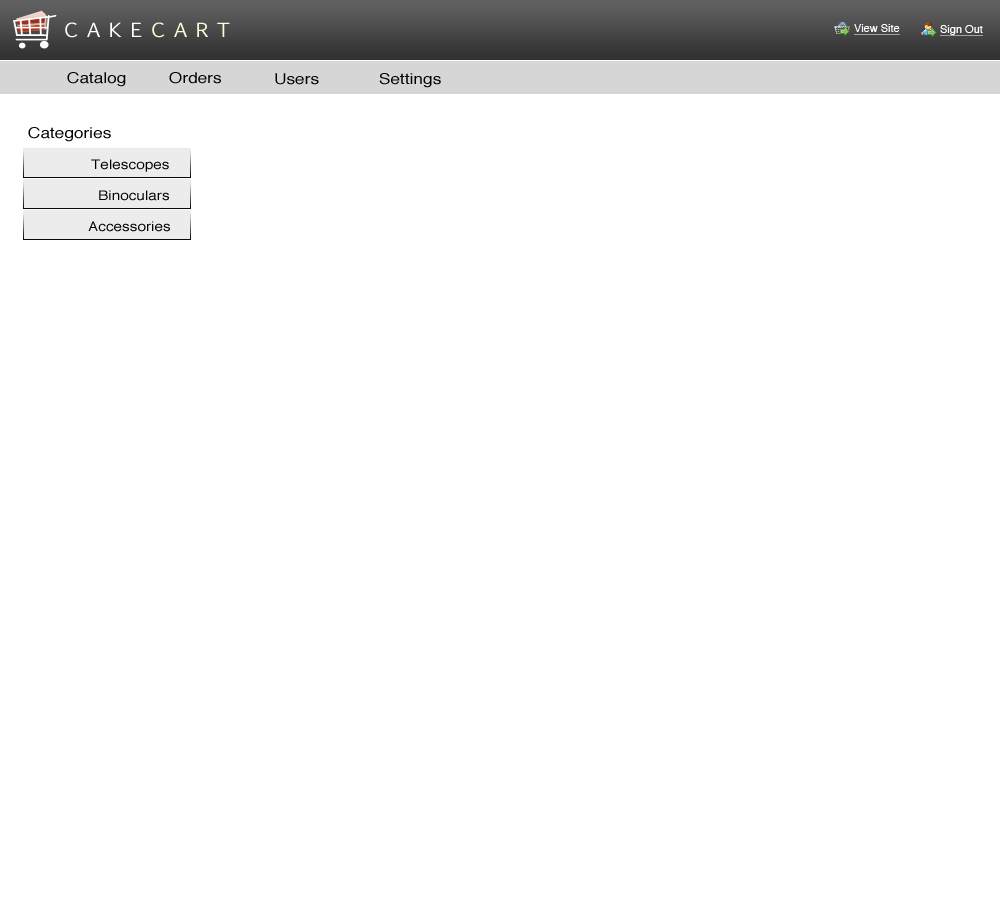
<style>
.page{position:relative;width:1000px;height:900px;background:#ffffff}
.page>*{position:absolute;margin:0}
.t1{font:18.5px "EuphemiaUCAS";letter-spacing:0.393em;color:#ffffff;scale:1.17 1}
.t2{font:18.5px "EuphemiaUCAS";letter-spacing:0.393em;color:#f8ffd4;scale:1.17 1}
.t3{font:11px "Helvetica";color:#ffffff;text-decoration:underline}
.t4{font:14.7px "Helvetica";color:#000000;scale:1.17 1}
.t5{font:13.1px "Helvetica";color:#000000;scale:1.17 1}
</style>
<div class="page">
<p class="t1" style="left:65px;top:22px;width:165px;height:16px">CAKE<span class="t2">CART</span></p>
<p class="t3" style="left:854px;top:24px;width:46px;height:11px">View Site</p>
<p class="t3" style="left:940px;top:25px;width:43px;height:11px">Sign Out</p>
<p class="t4" style="left:67px;top:72px;width:59px;height:15px">Catalog</p>
<p class="t4" style="left:169px;top:72px;width:52px;height:12px">Orders</p>
<p class="t4" style="left:275px;top:73px;width:44px;height:12px">Users</p>
<p class="t4" style="left:379px;top:73px;width:62px;height:15px">Settings</p>
<p class="t4" style="left:28px;top:127px;width:83px;height:15px">Categories</p>
<p class="t5" style="left:91px;top:159px;width:78px;height:13px">Telescopes</p>
<p class="t5" style="left:99px;top:190px;width:70px;height:11px">Binoculars</p>
<p class="t5" style="left:88px;top:221px;width:82px;height:11px">Accessories</p>
</div>
